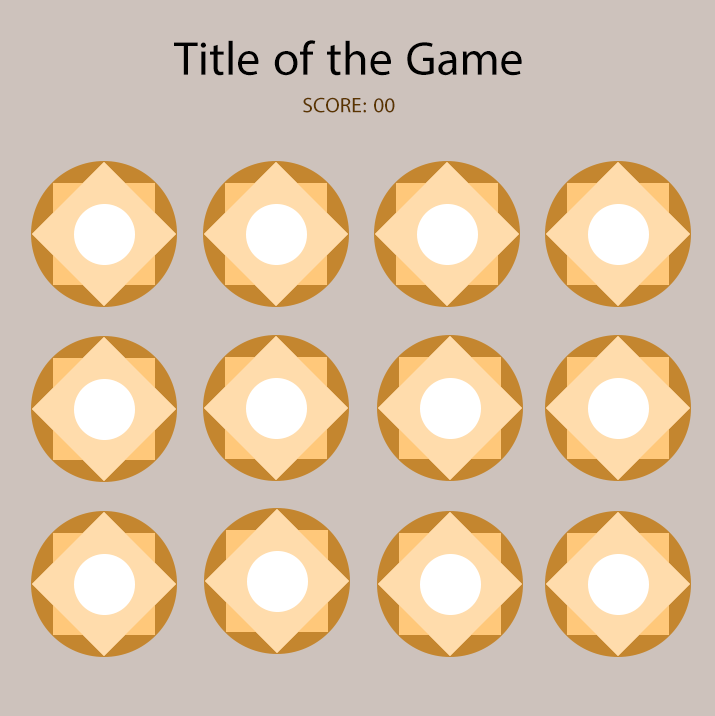
<style>
.page{position:relative;width:715px;height:716px;background:#cdc2bc}
.page>*{position:absolute;margin:0}
.t1{font:67.2px "MyriadArabic-Regular";color:#000000}
.t2{font:29.7px "MyriadArabic-Regular";color:#5b3500}
</style>
<div class="page">
<p class="t1" style="left:174px;top:40px;width:348px;height:36px">Title of the Game</p>
<p class="t2" style="left:303px;top:97px;width:92px;height:16px">SCORE: 00</p>
</div>
